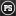
<style>
.page{position:relative;width:16px;height:16px}
.page>*{position:absolute;margin:0}
.t1{font:7.2px "Athletic";letter-spacing:0.03em;color:#ffffff}
</style>
<div class="page">
<p class="t1" style="left:4px;top:5px;width:8px;height:6px">PS</p>
</div>
